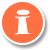
<style>
.page{position:relative;width:50px;height:50px;background:#ff7043}
.page>*{position:absolute;margin:0}
.t1{font:34.1px "SnapITC-Regular";color:#ffffff}
</style>
<div class="page">
<p class="t1" style="left:14px;top:9px;width:17px;height:26px">i</p>
</div>
